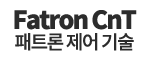
<style>
.page{position:relative;width:150px;height:60px;background:#ffffff}
.page>*{position:absolute;margin:0}
.t1{font:25px/43px "NotoSansCJKkr-Black";letter-spacing:-0.07em;color:#2c2c2c}
.t2{font:19px/20px "NotoSansCJKkr-Medium";letter-spacing:-0.07em;color:#2c2c2c}
</style>
<div class="page">
<p class="t1" style="left:14px;top:10px;width:123px;height:41px">Fatron CnT<br> <span class="t2">패트론 제어 기술</span></p>
</div>
